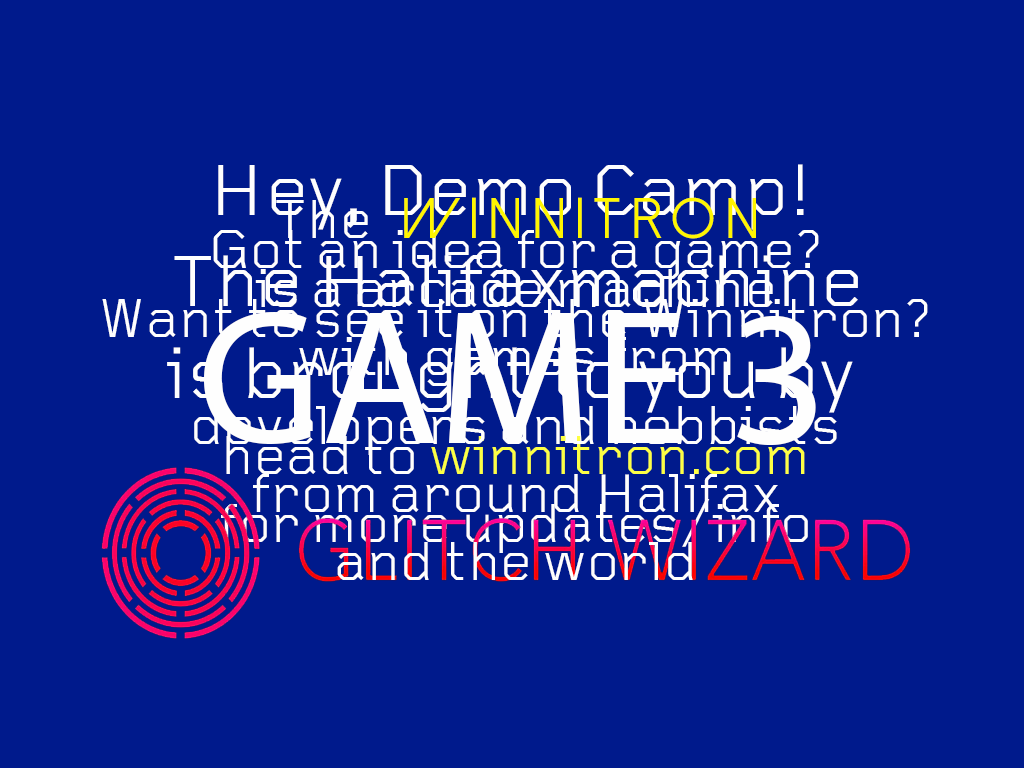
<style>
.page{position:relative;width:1024px;height:768px;background:#001a8c}
.page>*{position:absolute;margin:0}
.t1{font:76.4px "Gridnik";color:#fefefe}
.t2{font:57px "Gridnik";color:#fefefe}
.t3{font:57px "DolceVita";letter-spacing:0.2em;color:#fff600}
.t4{font:57px "Gridnik";color:#fdff44}
.t5{font:192.6px "MyriadPro-Regular";color:#fefefe}
</style>
<div class="page">
<p class="t1" style="left:167px;top:164px;width:691px;height:249px;text-align:center">Hey, Demo Camp!<br> The Halifaxmachine<br>is brought to you by</p>
<p class="t2" style="left:194px;top:197px;width:643px;height:383px;text-align:center">The   <span class="t3">WINNITRON<br></span>is a arcade machine<br>with games from<br>developers and hobbists<br>from around Halifax<br>and the world</p>
<p class="t2" style="left:102px;top:230px;width:826px;height:323px;text-align:center">Got an idea for a game?<br>Want to see it on the Winnitron?<br><br>head to <span class="t4">winnitron.com<br></span>for more updates/info</p>
<p class="t5" style="left:204px;top:312px;width:587px;height:132px">GAME 1</p>
<p class="t5" style="left:204px;top:312px;width:615px;height:132px">GAME 2</p>
<p class="t5" style="left:204px;top:312px;width:612px;height:134px">GAME 3</p>
</div>
